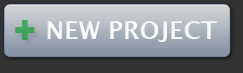
<style>
.page{position:relative;width:243px;height:73px;background:#333333}
.page>*{position:absolute;margin:0}
.t1{font:36px "Arial-Black";color:#43a35d;text-transform:uppercase}
.t2{font:24px "LucidaGrande-Bold";color:#ffffff;text-transform:uppercase}
</style>
<div class="page">
<p class="t1" style="left:15px;top:20px;width:20px;height:20px">+</p>
<p class="t2" style="left:47px;top:21px;width:170px;height:21px">New Project</p>
</div>
